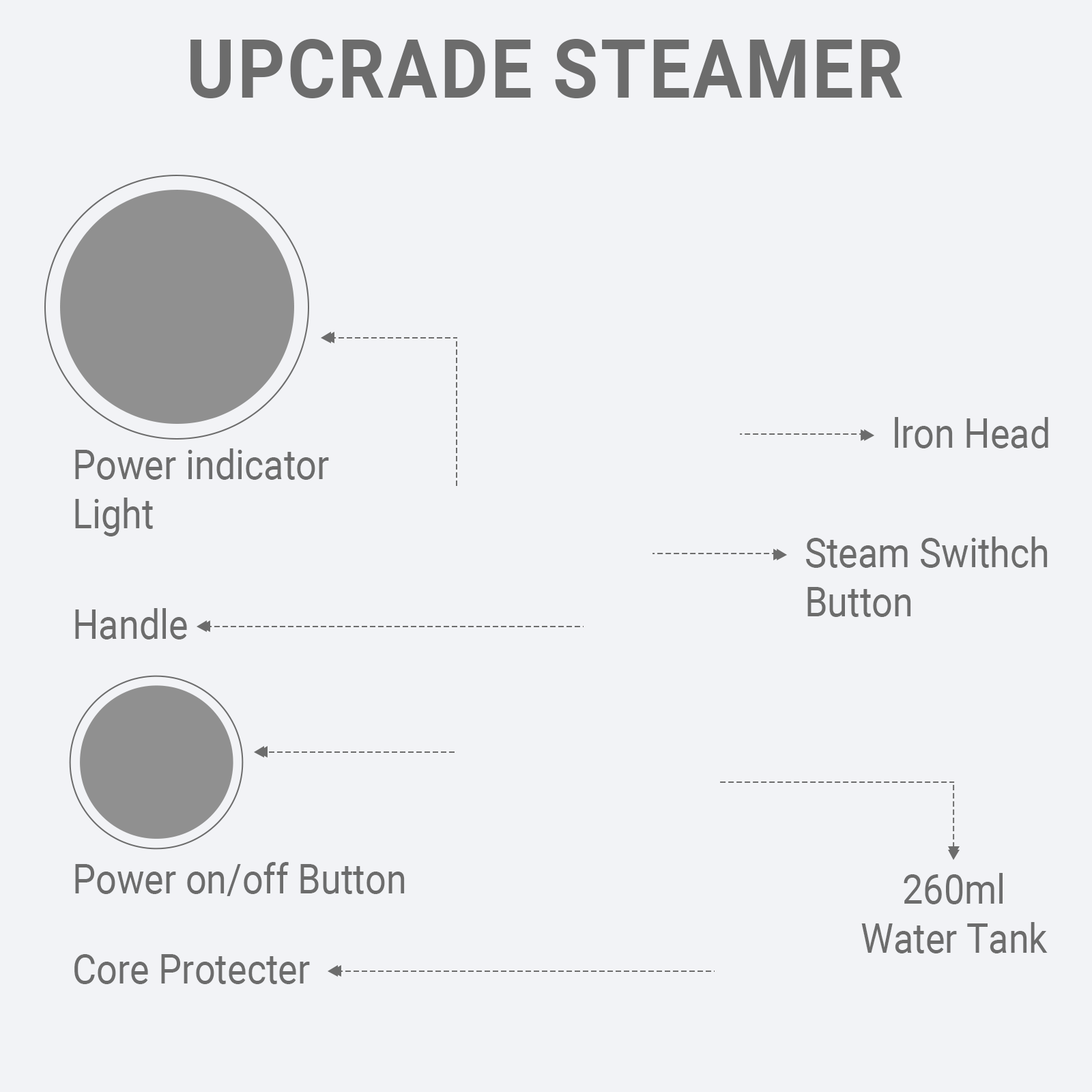
<style>
.page{position:relative;width:1092px;height:1092px;background:#f2f3f6}
.page>*{position:absolute;margin:0}
.t1{font:81.9px "Roboto-Bold";color:#6c6c6c;text-transform:uppercase;scale:0.9 1}
.t2{font:40.9px "Roboto-Regular";color:#6c6c6c;scale:0.9 1}
</style>
<div class="page">
<p class="t1" style="left:190px;top:39px;width:712px;height:59px">Upcrade steamer</p>
<p class="t2" style="left:895px;top:417px;width:153px;height:31px">lron Head</p>
<p class="t2" style="left:75px;top:448px;width:254px;height:88px">Power indicator<br>Light</p>
<p class="t2" style="left:806px;top:536px;width:242px;height:81px">Steam Swithch<br>Button</p>
<p class="t2" style="left:75px;top:608px;width:112px;height:31px">Handle</p>
<p class="t2" style="left:75px;top:862px;width:330px;height:34px">Power on/off Button</p>
<p class="t2" style="left:861px;top:873px;width:187px;height:80px;text-align:center">260ml<br>Water Tank</p>
<p class="t2" style="left:74px;top:954px;width:236px;height:30px">Core Protecter</p>
</div>
